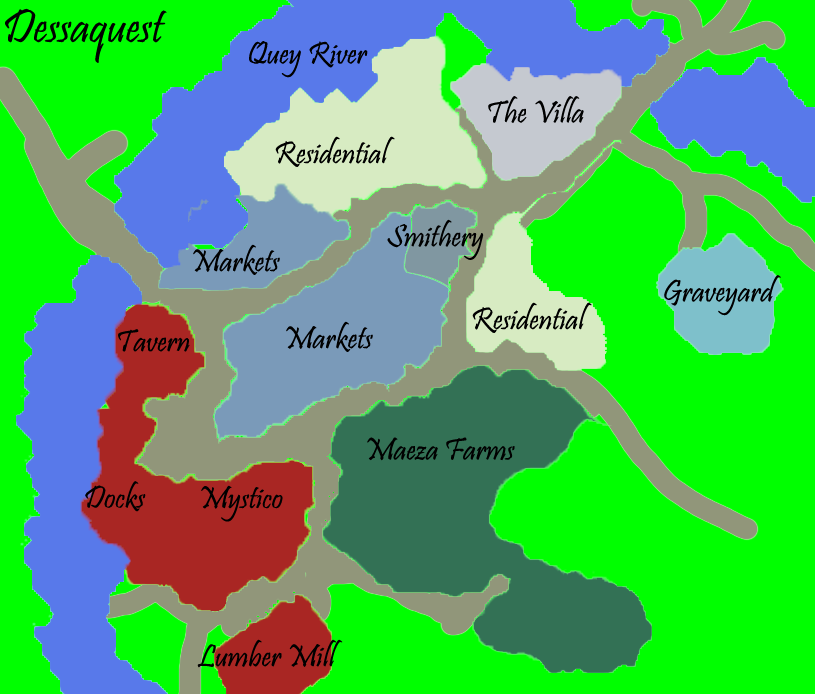
<style>
.page{position:relative;width:815px;height:694px;background:#00ff00}
.page>*{position:absolute;margin:0}
.t1{font:48px "Pristina-Regular";color:#000000}
.t2{font:32px "Pristina-Regular";color:#000000}
</style>
<div class="page">
<p class="t1" style="left:5px;top:8px;width:162px;height:55px">Dessaquest</p>
<p class="t2" style="left:249px;top:41px;width:119px;height:37px">Quey River</p>
<p class="t2" style="left:488px;top:96px;width:96px;height:27px">The Villa</p>
<p class="t2" style="left:275px;top:136px;width:120px;height:31px">Residential</p>
<p class="t2" style="left:387px;top:219px;width:97px;height:41px">Smithery</p>
<p class="t2" style="left:193px;top:244px;width:87px;height:31px">Markets</p>
<p class="t2" style="left:664px;top:275px;width:117px;height:41px">Graveyard</p>
<p class="t2" style="left:472px;top:302px;width:120px;height:31px">Residential</p>
<p class="t2" style="left:118px;top:329px;width:72px;height:23px">Tavern</p>
<p class="t2" style="left:286px;top:321px;width:87px;height:31px">Markets</p>
<p class="t2" style="left:367px;top:437px;width:148px;height:24px">Maeza Farms</p>
<p class="t2" style="left:85px;top:481px;width:61px;height:31px">Docks</p>
<p class="t2" style="left:201px;top:485px;width:82px;height:37px">Mystico</p>
<p class="t2" style="left:197px;top:639px;width:146px;height:29px">Lumber Mill</p>
</div>
